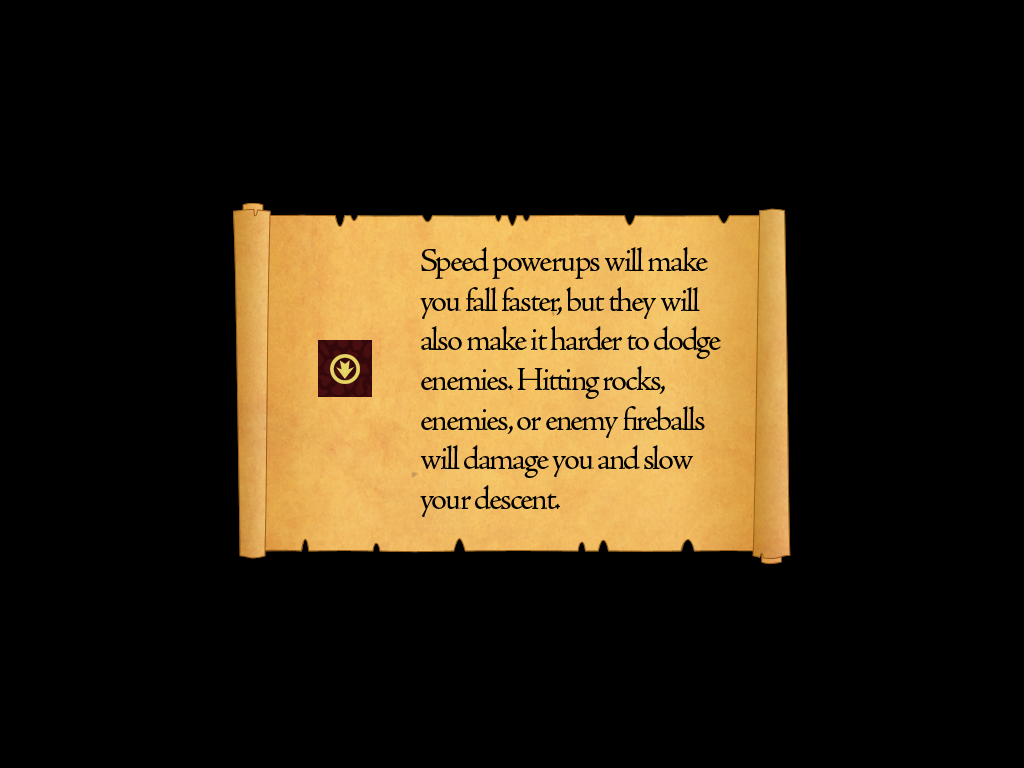
<style>
.page{position:relative;width:1024px;height:768px;background:#000000}
.page>*{position:absolute;margin:0}
.t1{font:33px "AJensonPro-Regular";letter-spacing:-0.06em;color:#000000}
</style>
<div class="page">
<p class="t1" style="left:420px;top:247px;width:301px;height:270px">Speed powerups will make you fall faster, but they will also make it harder to dodge enemies. Hitting rocks, enemies, or enemy fireballs will damage you and slow your descent.</p>
</div>
